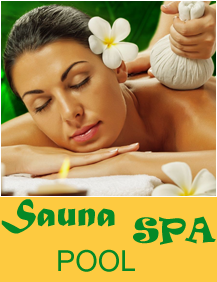
<style>
.page{position:relative;width:217px;height:282px;background:#fdca40}
.page>*{position:absolute;margin:0}
.t1{font:40px "MaturaMTScriptCapitals";color:#058927}
.t2{font:32px "Ravie";color:#058927}
.t3{font:32px "Raavi";color:#058927}
</style>
<div class="page">
<p class="t1" style="left:1px;top:199px;width:114px;height:35px">Sauna</p>
<p class="t2" style="left:133px;top:216px;width:83px;height:29px">SPA</p>
<p class="t3" style="left:58px;top:249px;width:77px;height:23px">POOL</p>
</div>
